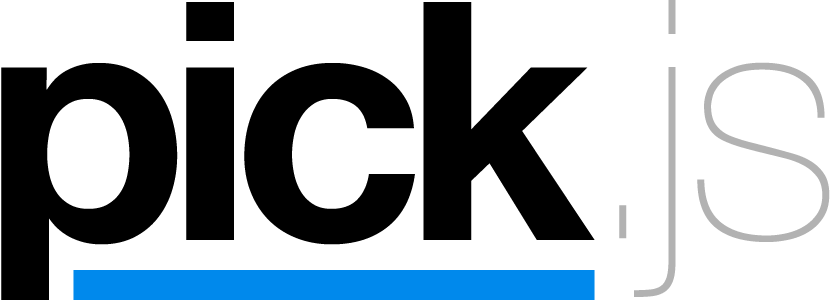
<style>
.page{position:relative;width:830px;height:300px;background:#ffffff}
.page>*{position:absolute;margin:0}
.t1{font:333.3px "HelveticaNeue-Bold";letter-spacing:-0.05em;color:#000000}
.t2{font:333.3px "HelveticaNeue-UltraLight";color:#b2b2b2}
</style>
<div class="page">
<p class="t1" style="left:1px;top:2px;width:594px;height:299px">pick</p>
<p class="t2" style="left:619px;top:0px;width:211px;height:297px">.js</p>
</div>
